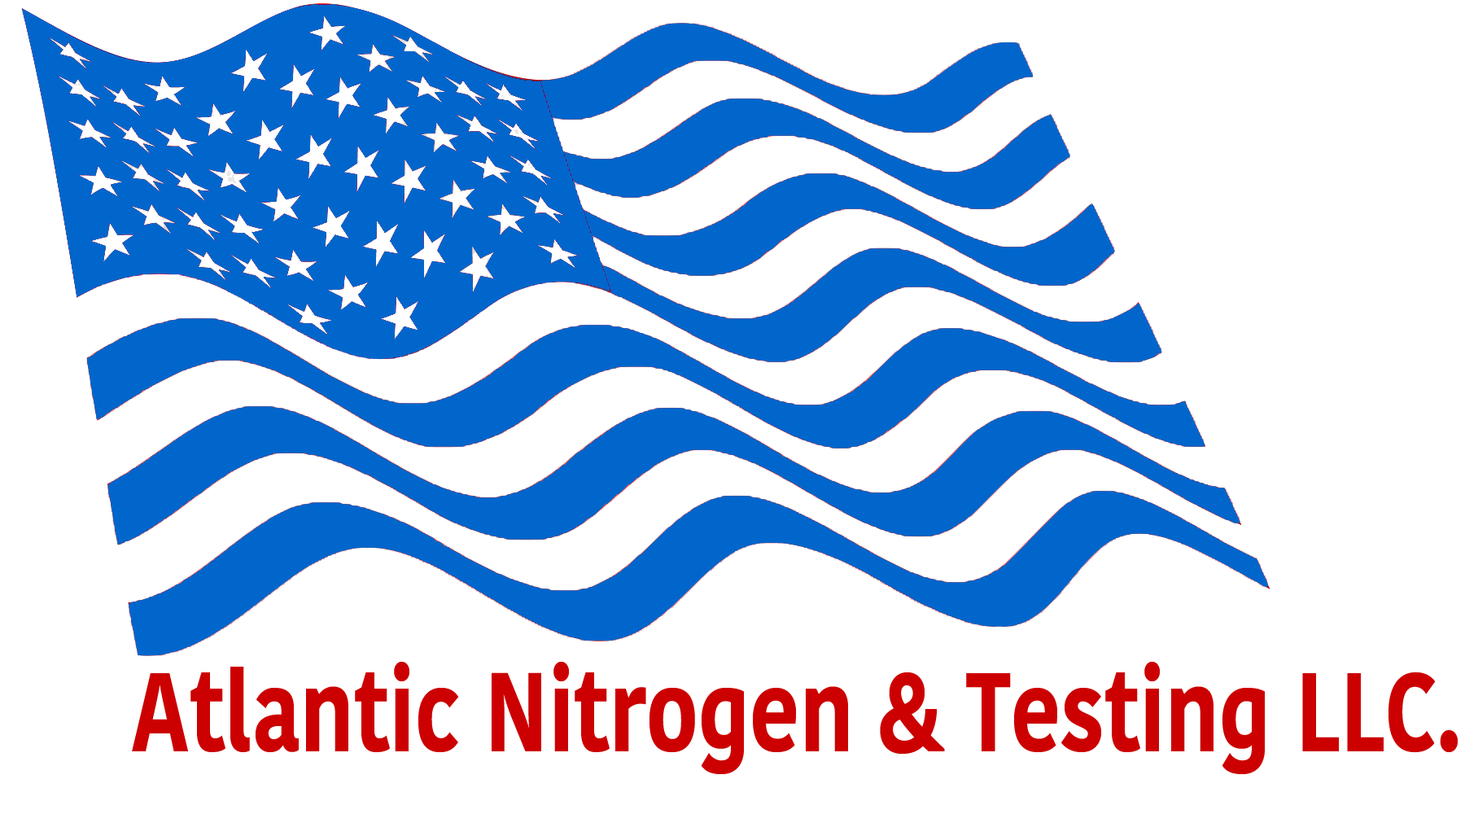
<style>
.page{position:relative;width:1465px;height:814px;background:#ffffff}
.page>*{position:absolute;margin:0}
.t1{font:111.5px "KohinoorDevanagari-Bold";color:#cc0000;scale:0.79 1}
</style>
<div class="page">
<p class="t1" style="left:132px;top:662px;width:1326px;height:112px">Atlantic Nitrogen &amp; Testing LLC.</p>
</div>
